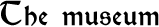
<style>
.page{position:relative;width:159px;height:27px;background:#ffffff}
.page>*{position:absolute;margin:0}
.t1{font:24px "Kelmscott-Regular";letter-spacing:0.05em;color:#000000}
.t2{font:30px "Kelmscott-Regular";letter-spacing:0.05em;color:#000000}
</style>
<div class="page">
<p class="t1" style="left:0px;top:0px;width:159px;height:26px"><span class="t2">T</span>he museum</p>
</div>
